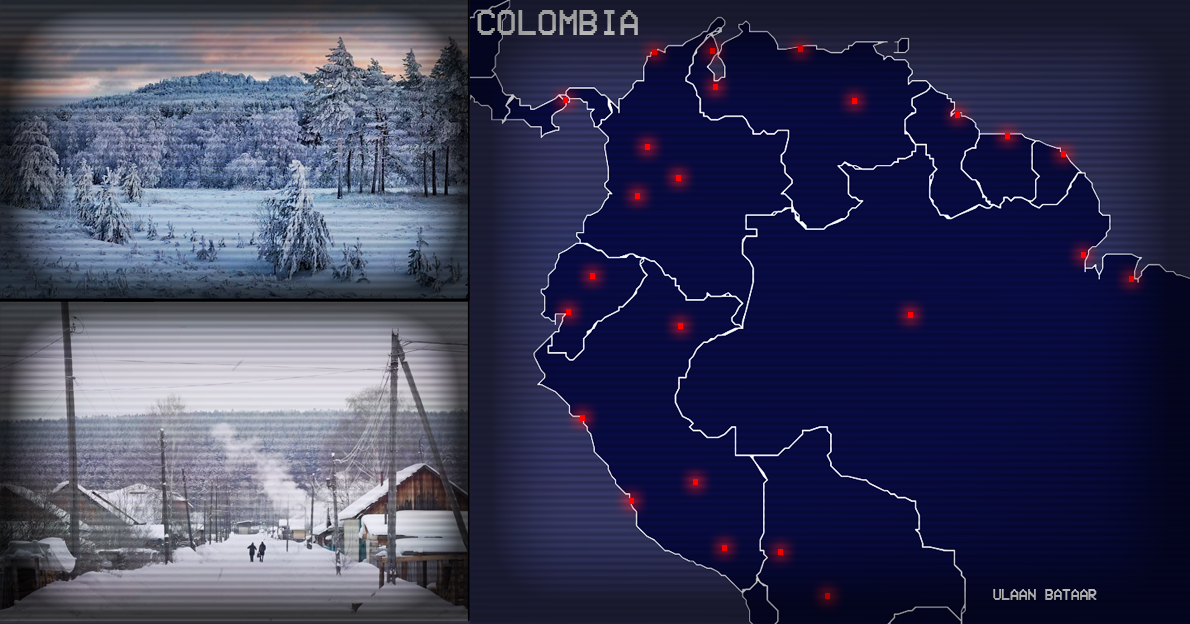
<style>
.page{position:relative;width:1190px;height:624px}
.page>*{position:absolute;margin:0}
.t1{font:37.3px "VCROSDMono";color:#9e9e9e;scale:0.94 1}
.t2{font:15.6px "VCROSDMono";color:#aeaeae;scale:0.95 1}
</style>
<div class="page">
<p class="t1" style="left:477px;top:10px;width:161px;height:25px">COLOMBIA</p>
<p class="t2" style="left:993px;top:589px;width:104px;height:11px">ULAAN BATAAR</p>
</div>
